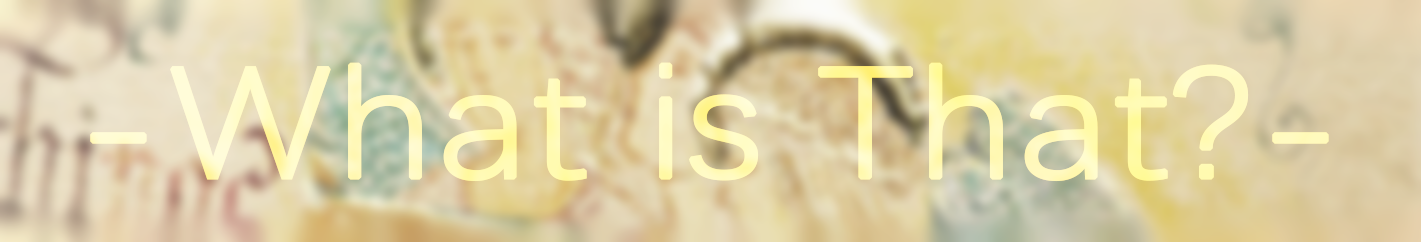
<style>
.page{position:relative;width:1421px;height:242px}
.page>*{position:absolute;margin:0}
.t1{font:158px "DengXian-Light";color:#fffabb;font-weight:bold;scale:1.15 1}
</style>
<div class="page">
<p class="t1" style="left:90px;top:62px;width:1239px;height:120px">-What is That?-</p>
<p class="t1" style="left:90px;top:62px;width:1239px;height:120px">-What is That?-</p>
</div>
